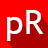
<style>
.page{position:relative;width:48px;height:48px;background:#ff0000}
.page>*{position:absolute;margin:0}
.t1{font:33.3px "TrebuchetMS";color:#ffffff}
</style>
<div class="page">
<p class="t1" style="left:7px;top:10px;width:37px;height:31px">pR</p>
</div>
